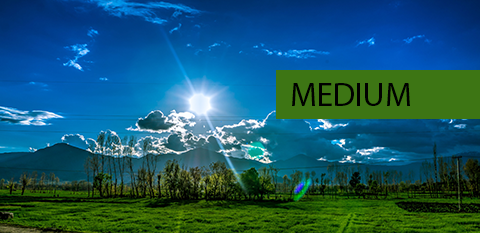
<style>
.page{position:relative;width:480px;height:233px}
.page>*{position:absolute;margin:0}
.t1{font:33.3px "MyriadPro-Regular";color:#000000}
</style>
<div class="page">
<p class="t1" style="left:292px;top:83px;width:118px;height:23px">MEDIUM</p>
</div>
